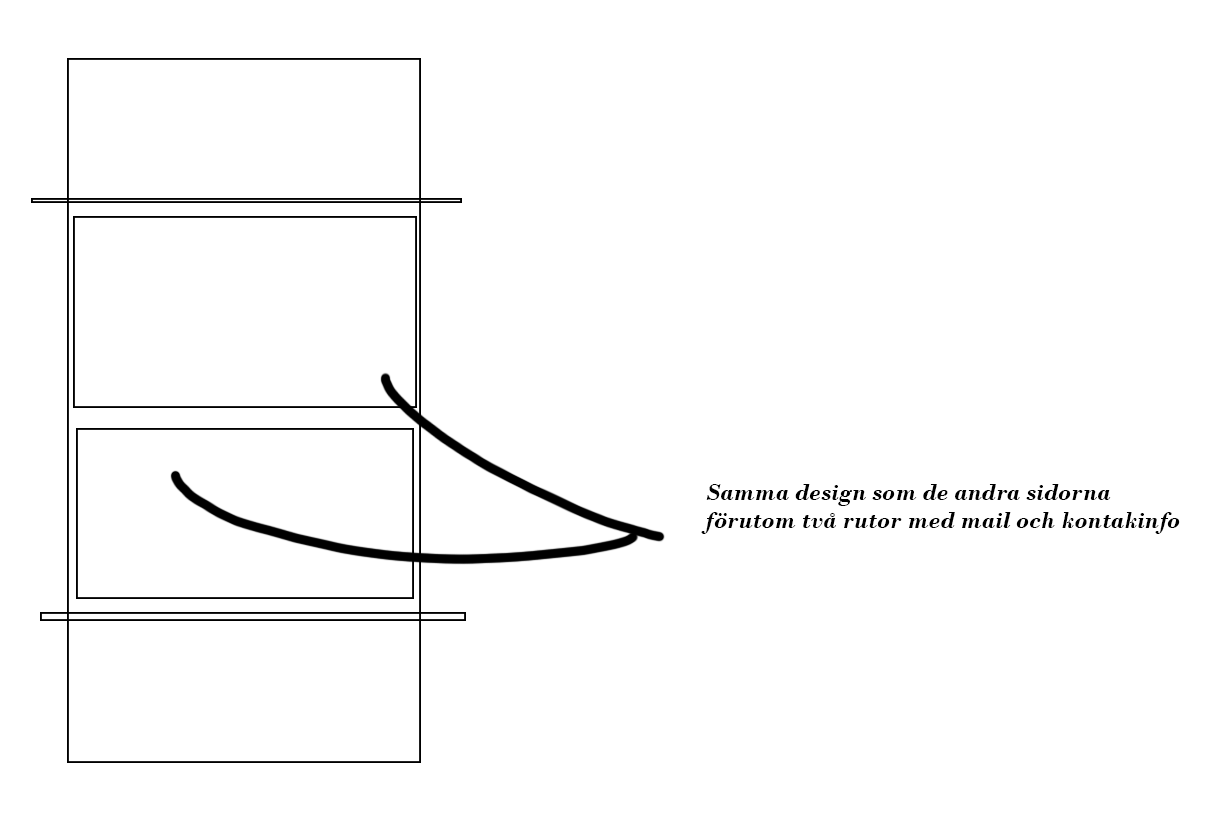
<style>
.page{position:relative;width:1224px;height:816px;background:#ffffff}
.page>*{position:absolute;margin:0}
.t1{font:24px "BodoniMT-BoldItalic";color:#000000}
</style>
<div class="page">
<p class="t1" style="left:701px;top:484px;width:479px;height:50px">Samma design som de andra sidorna<br>förutom två rutor med mail och kontakinfo</p>
</div>
